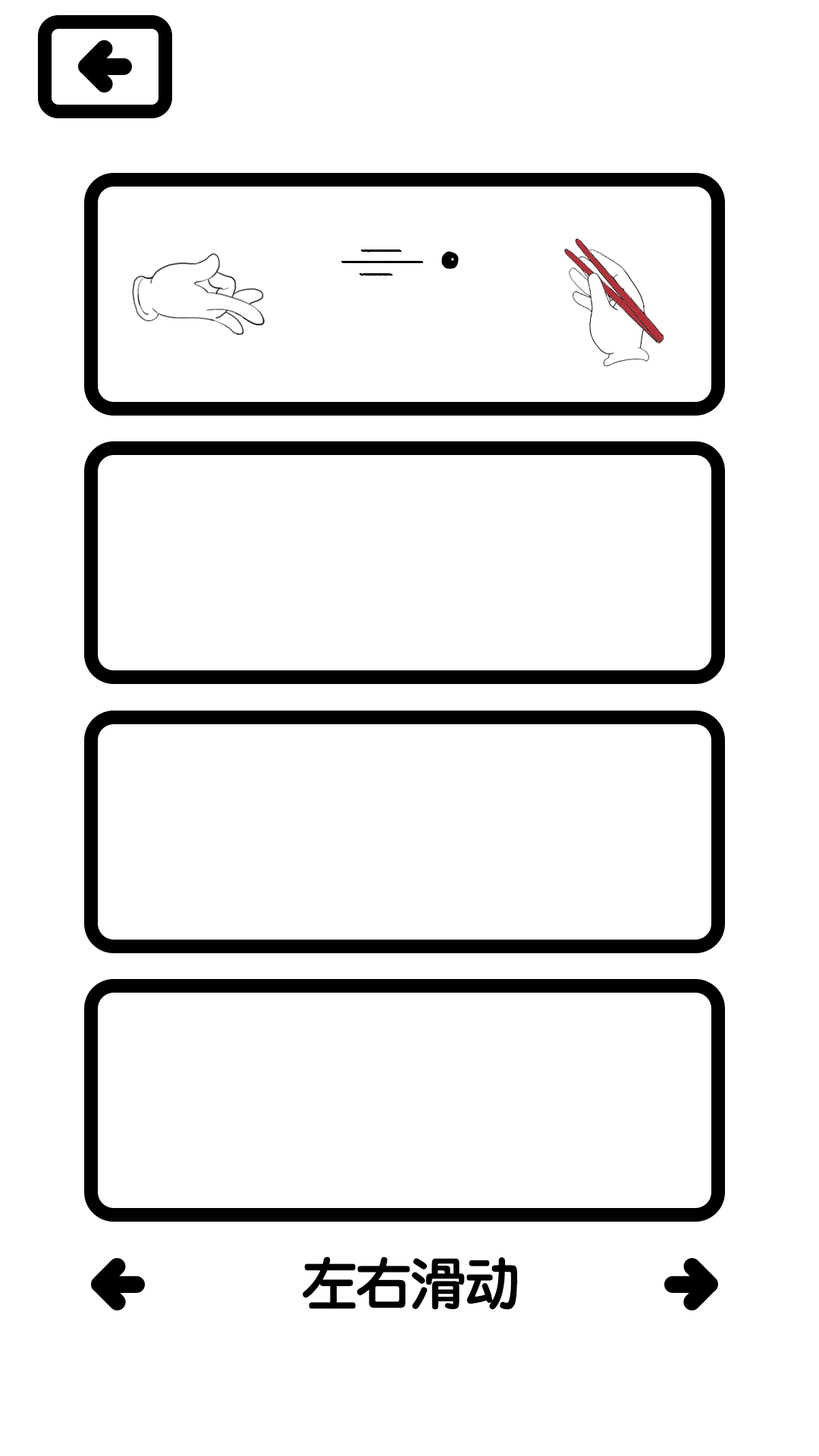
<style>
.page{position:relative;width:819px;height:1456px;background:#ffffff}
.page>*{position:absolute;margin:0}
.t1{font:54.7px "STYuanti-SC-Bold";color:#000000}
</style>
<div class="page">
<p class="t1" style="left:303px;top:1257px;width:214px;height:53px">左右滑动</p>
</div>
